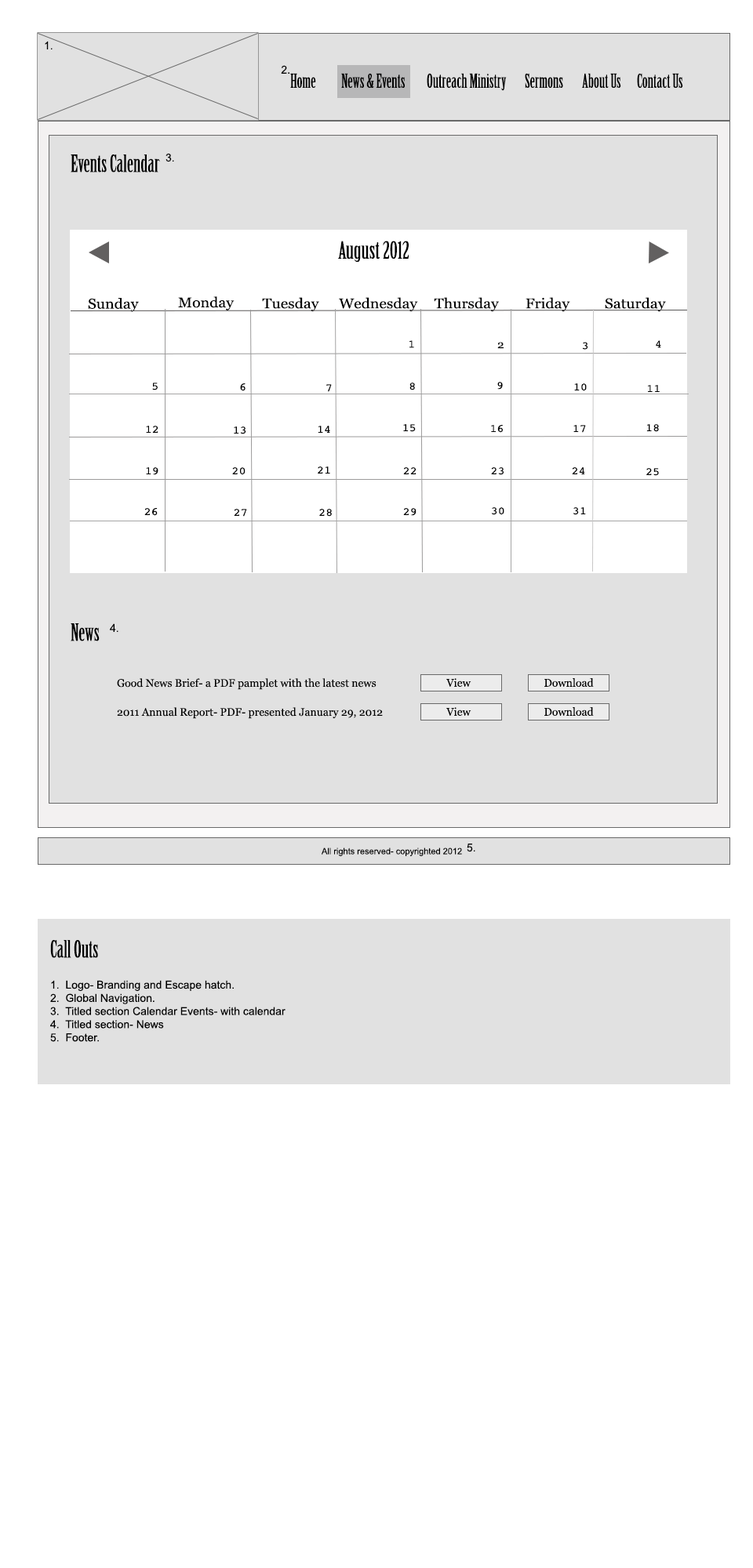
<style>
.page{position:relative;width:753px;height:1568px;background:#ffffff}
.page>*{position:absolute;margin:0}
.t1{font:11px "ArialMT";color:#000000}
.t2{font:18.8px "BirchStd";color:#000000}
.t3{font:23.5px "BirchStd";color:#000000}
.t4{font:23.5px "BirchStd";color:#000000;scale:1.09 1}
.t5{font:14.1px "Georgia";color:#000000;scale:1.09 1}
.t6{font:11px "Courier";color:#000000;scale:1.09 1}
.t7{font:11px "Georgia";color:#000000;scale:1.09 1}
.t8{font:11px "Georgia";color:#000000}
.t9{font:8.7px "ArialMT";color:#000000}
</style>
<div class="page">
<p class="t1" style="left:45px;top:41px;width:8px;height:8px">1.</p>
<p class="t1" style="left:281px;top:65px;width:8px;height:9px">2.</p>
<p class="t2" style="left:290px;top:73px;width:26px;height:15px">Home</p>
<p class="t2" style="left:341px;top:73px;width:64px;height:15px">News &amp; Events</p>
<p class="t2" style="left:426px;top:73px;width:80px;height:18px">Outreach Ministry</p>
<p class="t2" style="left:524px;top:73px;width:39px;height:15px">Sermons</p>
<p class="t2" style="left:582px;top:73px;width:39px;height:15px">About Us</p>
<p class="t2" style="left:637px;top:73px;width:46px;height:15px">Contact Us</p>
<p class="t3" style="left:71px;top:154px;width:89px;height:18px">Events Calendar</p>
<p class="t1" style="left:165px;top:153px;width:9px;height:9px">3.</p>
<p class="t4" style="left:338px;top:241px;width:70px;height:21px">August 2012</p>
<p class="t5" style="left:88px;top:298px;width:51px;height:14px">Sunday</p>
<p class="t5" style="left:178px;top:296px;width:56px;height:14px">Monday</p>
<p class="t5" style="left:262px;top:297px;width:57px;height:15px">Tuesday</p>
<p class="t5" style="left:339px;top:297px;width:79px;height:15px">Wednesday</p>
<p class="t5" style="left:434px;top:297px;width:65px;height:15px">Thursday</p>
<p class="t5" style="left:525px;top:297px;width:45px;height:15px">Friday</p>
<p class="t5" style="left:604px;top:297px;width:62px;height:15px">Saturday</p>
<p class="t6" style="left:409px;top:340px;width:5px;height:8px">1</p>
<p class="t7" style="left:497px;top:342px;width:6px;height:7px">2</p>
<p class="t6" style="left:582px;top:342px;width:6px;height:8px">3</p>
<p class="t6" style="left:655px;top:340px;width:6px;height:8px">4</p>
<p class="t6" style="left:152px;top:383px;width:6px;height:7px">5</p>
<p class="t6" style="left:240px;top:383px;width:5px;height:8px">6</p>
<p class="t6" style="left:326px;top:384px;width:6px;height:8px">7</p>
<p class="t6" style="left:409px;top:383px;width:6px;height:7px">8</p>
<p class="t6" style="left:497px;top:382px;width:6px;height:8px">9</p>
<p class="t6" style="left:574px;top:383px;width:12px;height:8px">10</p>
<p class="t6" style="left:648px;top:385px;width:11px;height:7px">11</p>
<p class="t6" style="left:146px;top:426px;width:12px;height:7px">12</p>
<p class="t6" style="left:318px;top:426px;width:12px;height:7px">14</p>
<p class="t6" style="left:403px;top:424px;width:13px;height:8px">15</p>
<p class="t6" style="left:491px;top:425px;width:12px;height:8px">16</p>
<p class="t6" style="left:573px;top:425px;width:13px;height:8px">17</p>
<p class="t6" style="left:646px;top:424px;width:13px;height:8px">18</p>
<p class="t6" style="left:234px;top:426px;width:12px;height:8px">13</p>
<p class="t6" style="left:146px;top:467px;width:12px;height:8px">19</p>
<p class="t6" style="left:232px;top:467px;width:13px;height:8px">20</p>
<p class="t6" style="left:318px;top:466px;width:12px;height:8px">21</p>
<p class="t6" style="left:403px;top:467px;width:13px;height:7px">22</p>
<p class="t6" style="left:491px;top:467px;width:13px;height:8px">23</p>
<p class="t6" style="left:572px;top:467px;width:13px;height:7px">24</p>
<p class="t6" style="left:646px;top:468px;width:13px;height:8px">25</p>
<p class="t6" style="left:144px;top:508px;width:14px;height:8px">26</p>
<p class="t6" style="left:234px;top:509px;width:13px;height:8px">27</p>
<p class="t6" style="left:319px;top:509px;width:13px;height:8px">28</p>
<p class="t6" style="left:403px;top:508px;width:13px;height:8px">29</p>
<p class="t6" style="left:491px;top:507px;width:13px;height:8px">30</p>
<p class="t6" style="left:572px;top:507px;width:14px;height:8px">31</p>
<p class="t3" style="left:71px;top:623px;width:29px;height:18px">News</p>
<p class="t1" style="left:110px;top:623px;width:8px;height:9px">4.</p>
<p class="t8" style="left:117px;top:678px;width:259px;height:12px">Good News Brief- a PDF pamplet with the latest news</p>
<p class="t8" style="left:446px;top:678px;width:25px;height:9px">View</p>
<p class="t8" style="left:544px;top:678px;width:49px;height:9px">Download</p>
<p class="t8" style="left:117px;top:707px;width:266px;height:12px">2011 Annual Report- PDF- presented January 29, 2012</p>
<p class="t8" style="left:446px;top:707px;width:25px;height:9px">View</p>
<p class="t8" style="left:544px;top:707px;width:49px;height:9px">Download</p>
<p class="t1" style="left:466px;top:844px;width:9px;height:8px">5.</p>
<p class="t9" style="left:321px;top:848px;width:141px;height:8px">All rights reserved- copyrighted 2012</p>
<p class="t3" style="left:50px;top:940px;width:48px;height:18px">Call Outs</p>
<p class="t1" style="left:50px;top:980px;width:235px;height:62px">1.  Logo- Branding and Escape hatch.<br>2.  Global Navigation.<br>3.  Titled section Calendar Events- with calendar<br>4.  Titled section- News<br>5.  Footer.</p>
</div>
